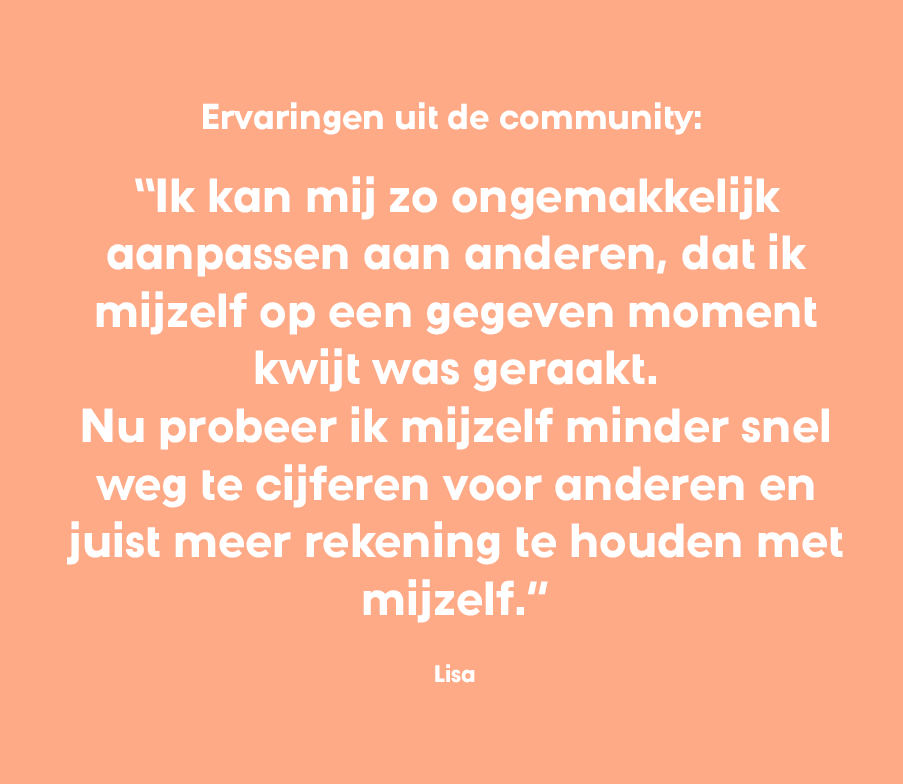
<style>
.page{position:relative;width:903px;height:784px;background:#ffaa86}
.page>*{position:absolute;margin:0}
.t1{font:36px "DNpro-Bold";color:#ffffff}
.t2{font:48px "DNpro-Bold";color:#ffffff}
.t3{font:24px "DNpro-Bold";color:#ffffff}
</style>
<div class="page">
<p class="t1" style="left:203px;top:102px;width:498px;height:33px">Ervaringen uit de community:</p>
<p class="t2" style="left:67px;top:176px;width:776px;height:447px;text-align:center">“Ik kan mij zo ongemakkelijk<br>aanpassen aan anderen, dat ik<br>mijzelf op een gegeven moment<br>kwijt was geraakt.<br>Nu probeer ik mijzelf minder snel<br>weg te cijferen voor anderen en<br>juist meer rekening te houden met<br>mijzelf.”</p>
<p class="t3" style="left:435px;top:664px;width:40px;height:19px">Lisa</p>
</div>
